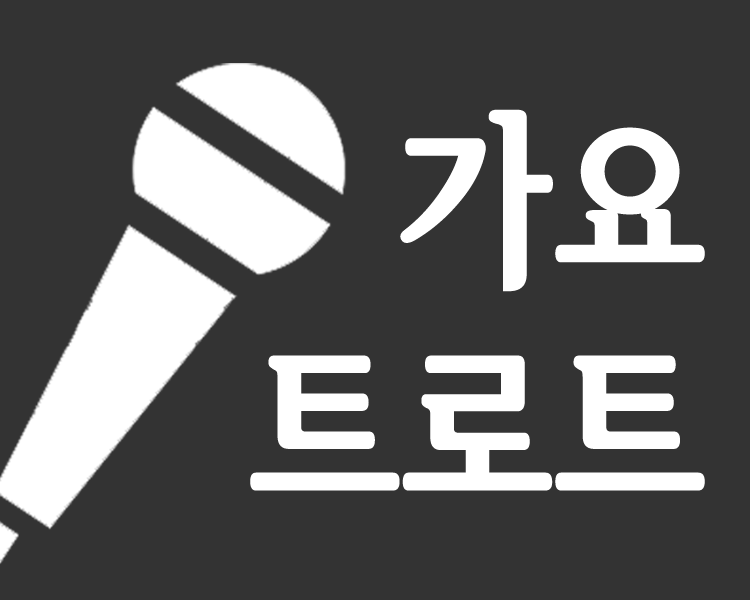
<style>
.page{position:relative;width:750px;height:600px;background:#333333}
.page>*{position:absolute;margin:0}
.t1{font:190px "SeoulHangangCBL";color:#ffffff}
</style>
<div class="page">
<p class="t1" style="left:250px;top:109px;width:455px;height:382px;text-align:right">가요<br>트로트</p>
</div>
